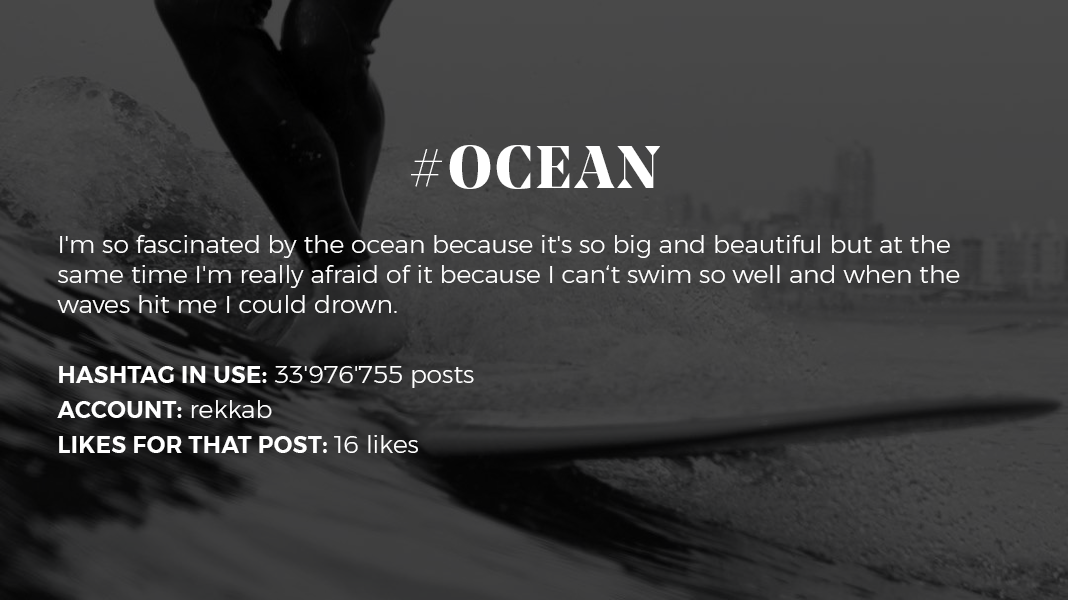
<style>
.page{position:relative;width:1068px;height:600px}
.page>*{position:absolute;margin:0}
.t1{font:25px "Montserrat-Light";color:#ffffff}
.t2{font:60px/35px "NoeDisplay-Bold";letter-spacing:0.05em;color:#ffffff;text-transform:uppercase}
.t3{font:23px/35px "Montserrat-SemiBold";letter-spacing:0.02em;color:#ffffff;text-transform:uppercase}
.t4{font:25px/35px "Montserrat-Light";color:#ffffff}
</style>
<div class="page">
<p class="t1" style="left:57px;top:145px;width:903px;height:308px;text-align:center"><span class="t2">#ocean<br><br></span>I'm so fascinated by the ocean because it's so big and beautiful but at the same time I'm really afraid of it because I can‘t swim so well and when the waves hit me I could drown. <br><br><span class="t3">Hashtag in use:</span><span class="t4"> 33'976'755 posts<br></span><span class="t3">Account:</span><span class="t4"> rekkab<br></span><span class="t3">Likes for that post: </span><span class="t4">16 likes</span></p>
</div>
